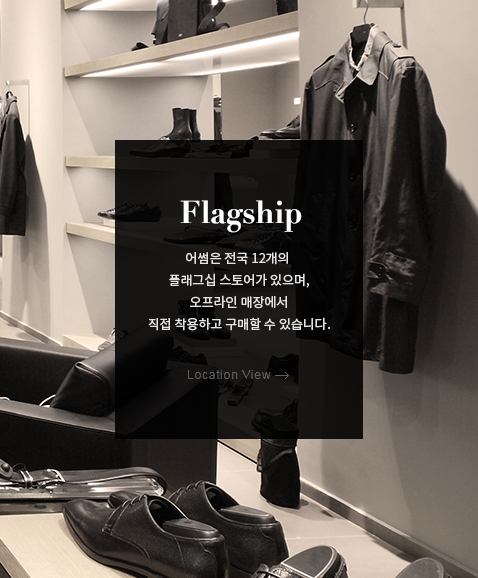
<style>
.page{position:relative;width:478px;height:578px}
.page>*{position:absolute;margin:0}
.t1{font:31px "DidotLH-Bold";letter-spacing:-0.01em;color:#ffffff}
.t2{font:13px/22px "NotoSansCJKkr-Regular";color:#e3e3e3}
.t3{font:12px "ArialMT";letter-spacing:0.05em;color:#5f5f5f}
</style>
<div class="page">
<p class="t1" style="left:180px;top:200px;width:122px;height:33px">Flagship</p>
<p class="t2" style="left:148px;top:252px;width:182px;height:79px;text-align:center">어썸은 전국 12개의 <br>플래그십 스토어가 있으며,<br>오프라인 매장에서<br>직접 착용하고 구매할 수 있습니다.</p>
<p class="t3" style="left:188px;top:370px;width:83px;height:9px">Location View</p>
</div>
